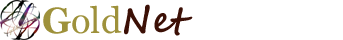
<style>
.page{position:relative;width:343px;height:40px;background:#ffffff}
.page>*{position:absolute;margin:0}
.t1{font:36px "Georgia";color:#9e913b}
.t2{font:36px "Georgia-Bold";color:#9e913b}
.t3{font:36px "SegoeScript-Bold";color:#3c1006}
</style>
<div class="page">
<p class="t1" style="left:43px;top:4px;width:150px;height:32px"><span class="t2">G</span>old<span class="t3">Net</span></p>
</div>
